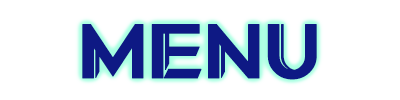
<style>
.page{position:relative;width:400px;height:100px;background:#ffffff}
.page>*{position:absolute;margin:0}
.t1{font:75px "SweraDemoShadowed";color:#0e1984;font-weight:bold}
</style>
<div class="page">
<p class="t1" style="left:82px;top:24px;width:235px;height:56px">Menu</p>
</div>
